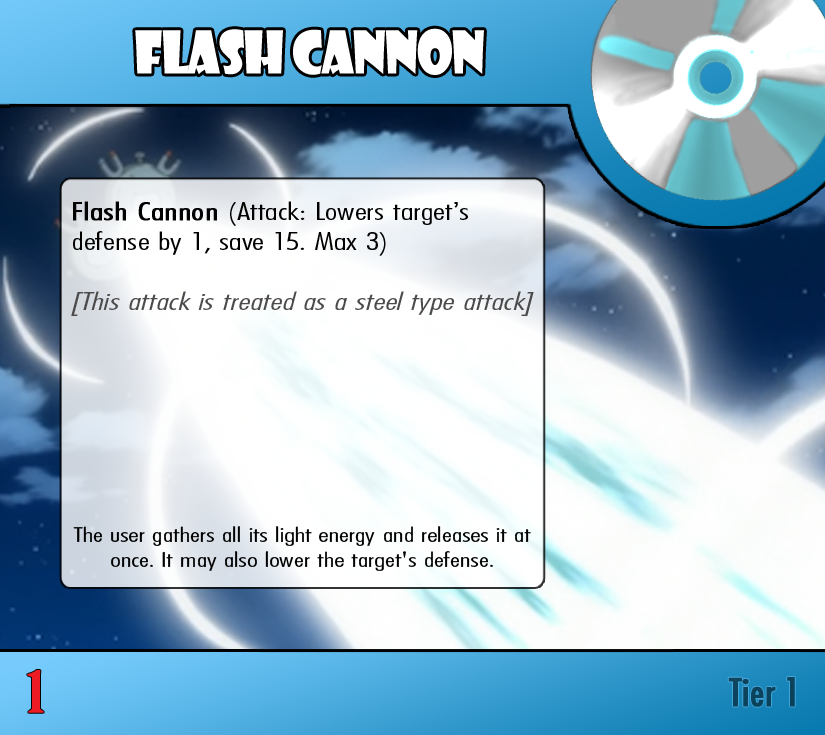
<style>
.page{position:relative;width:825px;height:735px}
.page>*{position:absolute;margin:0}
.t1{font:57.4px "ShowcardGothic-Reg";letter-spacing:-0.025em;color:#ffffff;scale:0.91 1}
.t2{font:25px "FuturaCondensedBQ-Light";color:#000000;scale:1.5 1}
.t3{font:25px "FuturaCondensedBQ-Light";color:#000000;font-weight:bold;scale:1.5 1}
.t4{font:25px "FuturaCondensedBQ-Light";color:#4c4b4b;font-style:italic;scale:1.5 1}
.t5{font:20.8px "FuturaCondensedBQ-Light";color:#000000;scale:1.5 1}
.t6{font:55.6px "BirchStd";color:#ed1c24;font-weight:bold;scale:1.5 1}
.t7{font:37.5px "Futura-Condensed-Normal";color:#0c425d;font-weight:bold}
</style>
<div class="page">
<p class="t1" style="left:135px;top:28px;width:349px;height:47px">Flash Cannon</p>
<p class="t2" style="left:71px;top:201px;width:463px;height:115px"><span class="t3">Flash Cannon </span>(Attack: Lowers target’s <br>defense by 1, save 15. Max 3)<br><br><span class="t4">[This attack is treated as a steel type attack]</span></p>
<p class="t5" style="left:73px;top:526px;width:458px;height:45px;text-align:center">The user gathers all its light energy and releases it at once. It may also lower the target's defense.</p>
<p class="t6" style="left:27px;top:670px;width:17px;height:43px">1</p>
<p class="t7" style="left:728px;top:677px;width:67px;height:30px">Tier 1</p>
</div>
